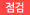
<style>
.page{position:relative;width:30px;height:15px;background:#ff4444}
.page>*{position:absolute;margin:0}
.t1{font:11px "NanumGothicBold";letter-spacing:-0.05em;color:#ffffff;scale:0.97 1}
</style>
<div class="page">
<p class="t1" style="left:5px;top:2px;width:19px;height:11px">점검</p>
</div>
